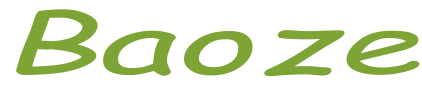
<style>
.page{position:relative;width:422px;height:98px;background:#ffffff}
.page>*{position:absolute;margin:0}
.t1{font:82.8px "ComicSansMS-Italic";color:#7da435;scale:1.85 1}
</style>
<div class="page">
<p class="t1" style="left:16px;top:9px;width:404px;height:68px">Baoze</p>
</div>
